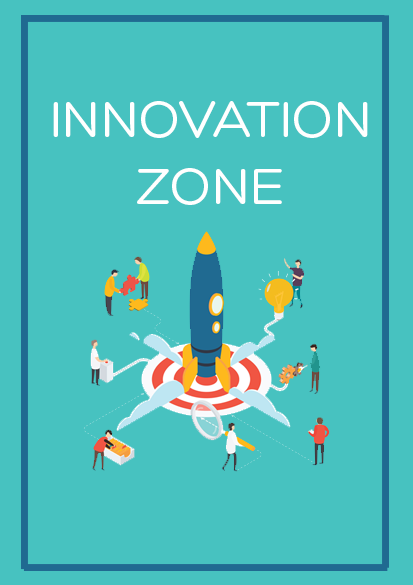
<style>
.page{position:relative;width:413px;height:585px;background:#47c2c0}
.page>*{position:absolute;margin:0}
.t1{font:55.6px "HeroLight-Regular";color:#ffffff}
</style>
<div class="page">
<p class="t1" style="left:53px;top:101px;width:315px;height:104px;text-align:center">INNOVATION<br>ZONE</p>
</div>
